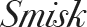
<style>
.page{position:relative;width:87px;height:27px;background:#ffffff}
.page>*{position:absolute;margin:0}
.t1{font:38px "BodoniSvtyTwoOSITCTTBookIt";color:#1e1e1e}
</style>
<div class="page">
<p class="t1" style="left:0px;top:0px;width:87px;height:27px">Smisk</p>
</div>
